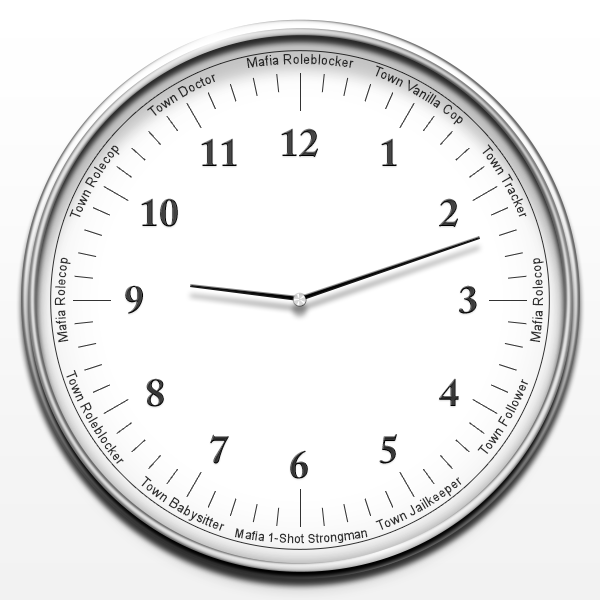
<style>
.page{position:relative;width:600px;height:600px;background:#ffffff}
.page>*{position:absolute;margin:0}
.t1{font:13px "ArialMT";color:#333333}
.t2{font:40px "ACaslonPro-Bold";color:#333333}
.t3{font:40px "ACaslonPro-Bold"}
.t4{font:12px "ArialMT";color:#333333}
</style>
<div class="page">
<p class="t1" style="left:246px;top:53px;width:108px;height:15px">Mafia Roleblocker</p>
<p class="t1" style="left:375px;top:65px;width:88px;height:60px;rotate:30deg">Town Vanilla Cop</p>
<p class="t1" style="left:147px;top:74px;width:68px;height:42px;rotate:-30deg">Town Doctor</p>
<p class="t2" style="left:281px;top:128px;width:37px;height:29px">12</p>
<p class="t1" style="left:69px;top:145px;width:51px;height:72px;rotate:-60deg">Town Rolecop</p>
<p class="t2" style="left:201px;top:138px;width:36px;height:28px">11</p>
<p class="t2" style="left:381px;top:138px;width:16px;height:28px">1</p>
<p class="t1" style="left:482px;top:144px;width:45px;height:73px;rotate:60deg">Town Tracker</p>
<p class="t2" style="left:141px;top:198px;width:37px;height:29px">10</p>
<p class="t3" style="left:439px;top:198px;width:19px;height:29px">2</p>
<p class="t1" style="left:54px;top:257px;width:17px;height:86px;rotate:-90deg">Mafia Rolecop</p>
<p class="t1" style="left:529px;top:258px;width:15px;height:85px;rotate:-90deg">Mafia Rolecop</p>
<p class="t2" style="left:125px;top:285px;width:18px;height:29px">9</p>
<p class="t2" style="left:459px;top:285px;width:18px;height:29px">3</p>
<p class="t1" style="left:66px;top:370px;width:58px;height:94px;rotate:60deg">Town Roleblocker</p>
<p class="t2" style="left:146px;top:378px;width:18px;height:29px">8</p>
<p class="t2" style="left:439px;top:378px;width:20px;height:28px">4</p>
<p class="t1" style="left:477px;top:379px;width:51px;height:75px;rotate:-60deg">Town Follower</p>
<p class="t2" style="left:210px;top:434px;width:19px;height:30px">7</p>
<p class="t2" style="left:379px;top:434px;width:18px;height:30px">5</p>
<p class="t2" style="left:290px;top:450px;width:18px;height:29px">6</p>
<p class="t1" style="left:141px;top:475px;width:84px;height:56px;rotate:30deg">Town Babysitter</p>
<p class="t1" style="left:375px;top:477px;width:87px;height:53px;rotate:-30deg">Town Jailkeeper</p>
<p class="t4" style="left:235px;top:528px;width:133px;height:16px">Mafia 1-Shot Strongman</p>
</div>
